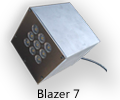
<style>
.page{position:relative;width:120px;height:100px}
.page>*{position:absolute;margin:0}
.t1{font:11px "MicrosoftYaHei";letter-spacing:0.015em;color:#000000}
</style>
<div class="page">
<p class="t1" style="left:38px;top:89px;width:42px;height:9px">Blazer 7</p>
</div>
